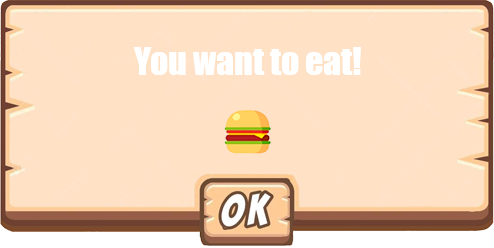
<style>
.page{position:relative;width:494px;height:248px;background:#ffe1c6}
.page>*{position:absolute;margin:0}
.t1{font:36px "Impact";color:#ffffff}
</style>
<div class="page">
<p class="t1" style="left:133px;top:47px;width:228px;height:28px">You want to eat!</p>
</div>
